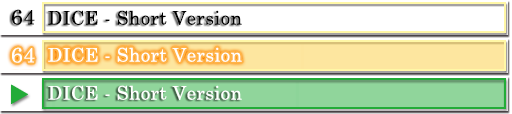
<style>
.page{position:relative;width:512px;height:114px;background:#ffffff}
.page>*{position:absolute;margin:0}
.t1{font:21.3px "CenturySchoolbook";letter-spacing:0.025em;color:#000000}
.t2{font:18.7px "CenturySchoolbook";letter-spacing:0.025em;color:#000000}
.t3{font:21.3px "CenturySchoolbook";letter-spacing:0.025em;color:#ffffff}
.t4{font:18.7px "CenturySchoolbook";letter-spacing:0.025em;color:#ffffff}
</style>
<div class="page">
<p class="t1" style="left:12px;top:9px;width:23px;height:16px">64</p>
<p class="t2" style="left:48px;top:10px;width:194px;height:15px">DICE - Short Version</p>
<p class="t3" style="left:12px;top:47px;width:23px;height:16px">64</p>
<p class="t4" style="left:48px;top:47px;width:194px;height:15px">DICE - Short Version</p>
<p class="t4" style="left:48px;top:85px;width:194px;height:15px">DICE - Short Version</p>
</div>
